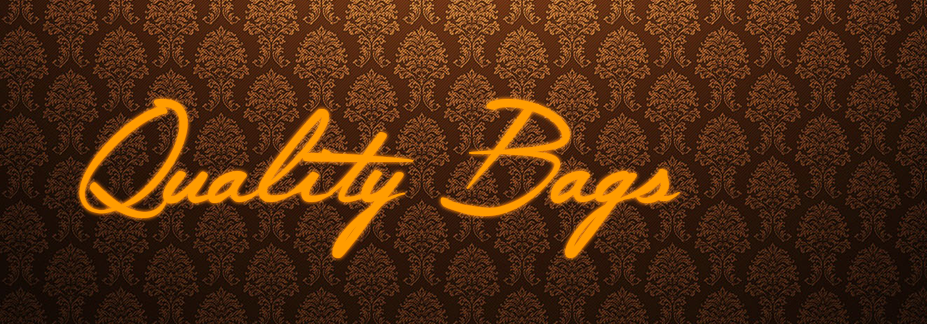
<style>
.page{position:relative;width:927px;height:324px}
.page>*{position:absolute;margin:0}
.t1{font:251.3px "The-Constellation-of-Heracles";color:#ff9c00}
</style>
<div class="page">
<p class="t1" style="left:79px;top:99px;width:601px;height:159px">Quality Bags</p>
</div>
